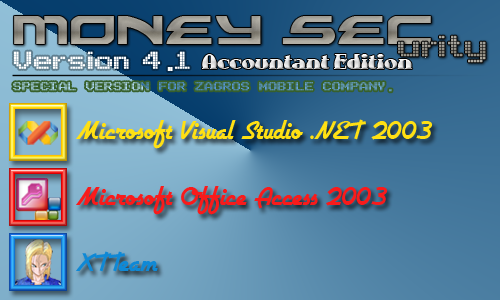
<style>
.page{position:relative;width:500px;height:300px}
.page>*{position:absolute;margin:0}
.t1{font:75.1px "Alexis"}
.t2{font:45.1px "Arcade";color:#9a978c}
.t3{font:37.6px "Arcade";color:#ffffff}
.t4{font:24px "AuntBertha"}
.t5{font:17.5px "Arcade"}
.t6{font:30px "Airstream";color:#ffe013}
.t7{font:30px "Airstream";color:#f91b1b}
.t8{font:30px "Airstream";color:#0f88d5}
</style>
<div class="page">
<p class="t1" style="left:14px;top:16px;width:417px;height:28px">Money Sec</p>
<p class="t2" style="left:398px;top:35px;width:88px;height:28px">urity</p>
<p class="t3" style="left:13px;top:51px;width:116px;height:18px">Version</p>
<p class="t3" style="left:142px;top:51px;width:48px;height:20px">4.1</p>
<p class="t4" style="left:202px;top:54px;width:211px;height:15px">Accountant Edition</p>
<p class="t5" style="left:13px;top:82px;width:379px;height:10px">SPECIAL VERSION FOR ZAGROS MOBILE COMPANY.</p>
<p class="t6" style="left:76px;top:119px;width:357px;height:30px">Microsoft Visual Studio .NET 2003</p>
<p class="t7" style="left:76px;top:186px;width:312px;height:29px">Microsoft Office Access 2003</p>
<p class="t8" style="left:76px;top:251px;width:82px;height:21px">XTTeam</p>
</div>
